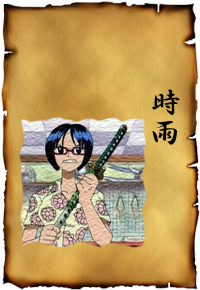
<style>
.page{position:relative;width:200px;height:290px}
.page>*{position:absolute;margin:0}
.t1{font:30px "HGPGyoshotai";color:#000000}
</style>
<div class="page">
<p class="t1" style="left:152px;top:89px;width:28px;height:56px;text-align:center">時雨</p>
</div>
